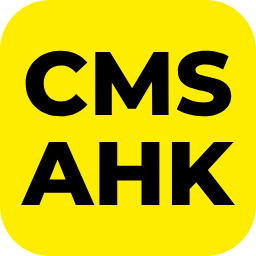
<style>
.page{position:relative;width:256px;height:256px;background:#ffed00}
.page>*{position:absolute;margin:0}
.t1{font:90px/90px "Montserrat-ExtraBold";color:#000000}
</style>
<div class="page">
<p class="t1" style="left:21px;top:50px;width:214px;height:155px;text-align:center">CMS<br>AHK</p>
</div>
